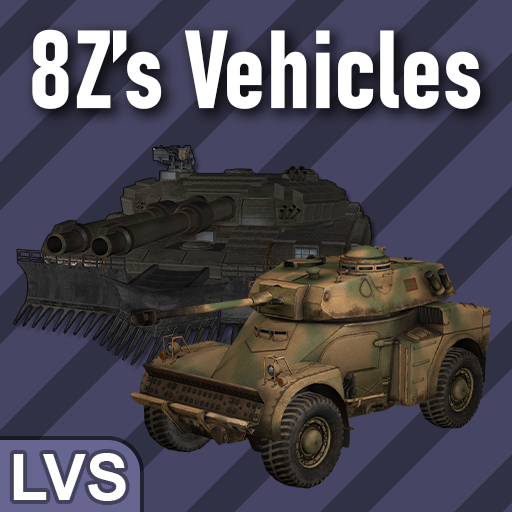
<style>
.page{position:relative;width:512px;height:512px;background:#464664}
.page>*{position:absolute;margin:0}
.t1{font:109.3px "Bahnschrift-BoldCondensed";color:#ffffff}
.t2{font:64px "Arial-BoldMT";color:#ffffff}
</style>
<div class="page">
<p class="t1" style="left:32px;top:29px;width:449px;height:80px">8Z’s Vehicles</p>
<p class="t2" style="left:13px;top:453px;width:113px;height:48px">LVS</p>
</div>
